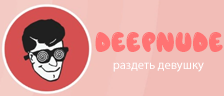
<style>
.page{position:relative;width:224px;height:96px;background:#f2bdb7}
.page>*{position:absolute;margin:0}
.t1{font:28.5px "Airfool";color:#ff7373}
.t2{font:12.5px "MyriadPro-Regular";color:#ffffff}
</style>
<div class="page">
<p class="t1" style="left:95px;top:32px;width:128px;height:20px">DeepNude</p>
<p class="t2" style="left:113px;top:62px;width:91px;height:10px">раздеть девушку</p>
</div>
